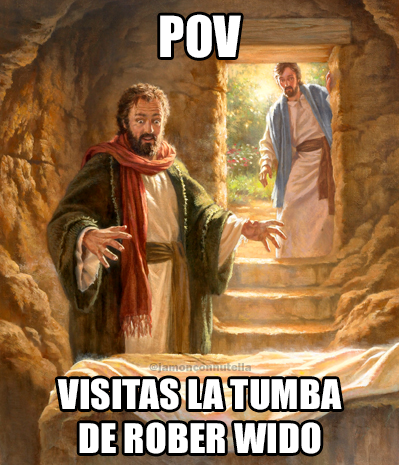
<style>
.page{position:relative;width:399px;height:465px}
.page>*{position:absolute;margin:0}
.t1{font:52.2px "Impact";color:#ffffff}
.t2{font:11.8px "FranklinGothic-Heavy"}
.t3{font:37.7px "Impact";color:#ffffff;scale:1.06 1}
</style>
<div class="page">
<p class="t1" style="left:160px;top:14px;width:81px;height:44px">POV</p>
<p class="t2" style="left:149px;top:363px;width:103px;height:10px">@jamonconnutella</p>
<p class="t3" style="left:57px;top:378px;width:285px;height:76px;text-align:center">VISITAS LA TUMBA<br>DE ROBER WIDO</p>
</div>
